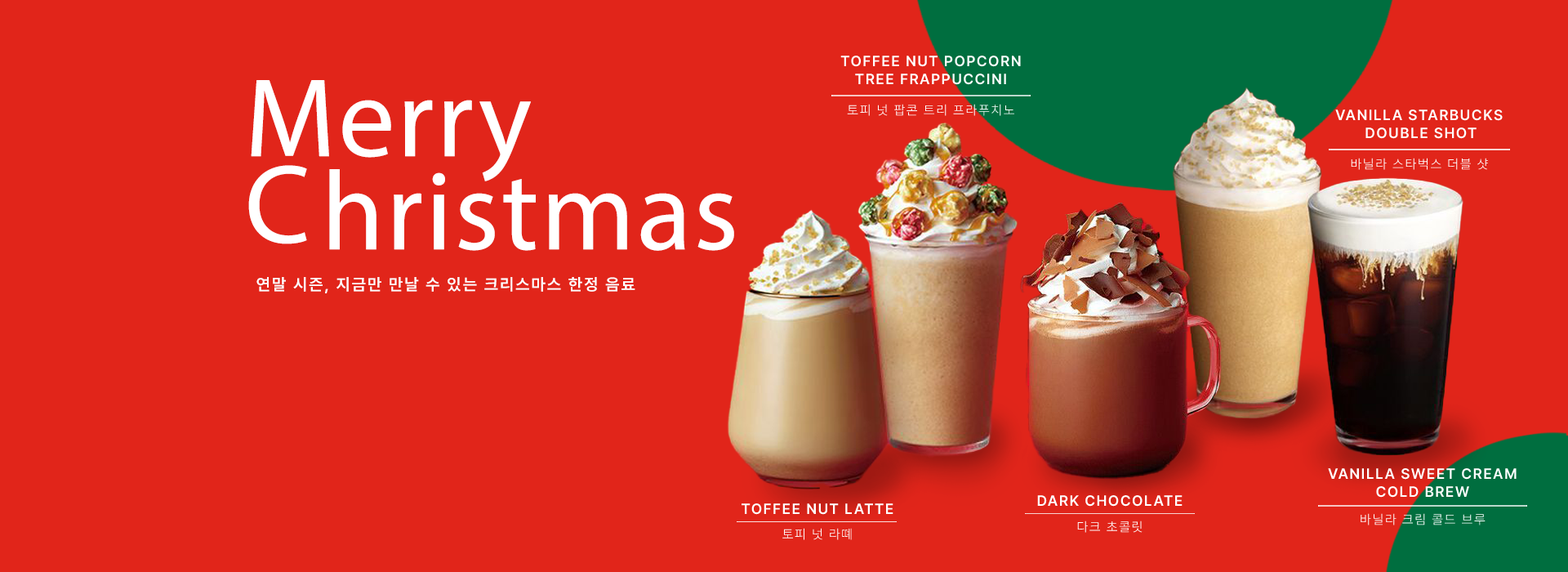
<style>
.page{position:relative;width:1568px;height:572px;background:#e1251a}
.page>*{position:absolute;margin:0}
.t1{font:14.7px/18px "Pretendard-SemiBold";letter-spacing:0.08em;color:#ffffff}
.t2{font:112.7px/93.1px "MyriadPro-Regular";letter-spacing:0.02em;color:#ffffff}
.t3{font:112.7px/93.1px "MyriadPro-Regular";letter-spacing:0.1em;color:#ffffff}
.t4{font:13.1px "Pretendard-Light";letter-spacing:0.1em;color:#ffffff}
.t5{font:16.3px "Pretendard-SemiBold";letter-spacing:0.1em;color:#ffffff}
.t6{font:14.7px "Pretendard-SemiBold";letter-spacing:0.08em;color:#ffffff}
</style>
<div class="page">
<p class="t1" style="left:840px;top:56px;width:181px;height:29px;text-align:center">TOFFEE NUT POPCORN<br>TREE FRAPPUCCINI</p>
<p class="t2" style="left:248px;top:80px;width:486px;height:171px">Merry<br><span class="t3">C</span>hristmas</p>
<p class="t4" style="left:847px;top:104px;width:167px;height:12px">토피 넛 팝콘 트리 프라푸치노</p>
<p class="t1" style="left:1335px;top:109px;width:168px;height:30px;text-align:center">VANILLA STARBUCKS <br>DOUBLE SHOT</p>
<p class="t4" style="left:1351px;top:158px;width:137px;height:12px">바닐라 스타벅스 더블 샷</p>
<p class="t5" style="left:256px;top:277px;width:379px;height:16px">연말 시즌, 지금만 만날 수 있는 크리스마스 한정 음료</p>
<p class="t1" style="left:1328px;top:468px;width:189px;height:29px;text-align:center">VANILLA SWEET CREAM<br>COLD BREW</p>
<p class="t6" style="left:1037px;top:495px;width:146px;height:11px">DARK CHOCOLATE</p>
<p class="t6" style="left:742px;top:503px;width:151px;height:11px">TOFFEE NUT LATTE</p>
<p class="t4" style="left:1077px;top:520px;width:66px;height:12px">다크 초콜릿</p>
<p class="t4" style="left:1361px;top:513px;width:125px;height:12px">바닐라 크림 콜드 브루</p>
<p class="t4" style="left:782px;top:528px;width:70px;height:12px">토피 넛 라뗴</p>
</div>
